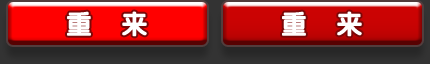
<style>
.page{position:relative;width:430px;height:64px}
.page>*{position:absolute;margin:0}
.t1{font:26px "JCuYuan";letter-spacing:0.4em;color:#ffffff;font-weight:bold}
</style>
<div class="page">
<p class="t1" style="left:67px;top:11px;width:80px;height:26px">重 来</p>
<p class="t1" style="left:282px;top:11px;width:80px;height:26px">重 来</p>
</div>
